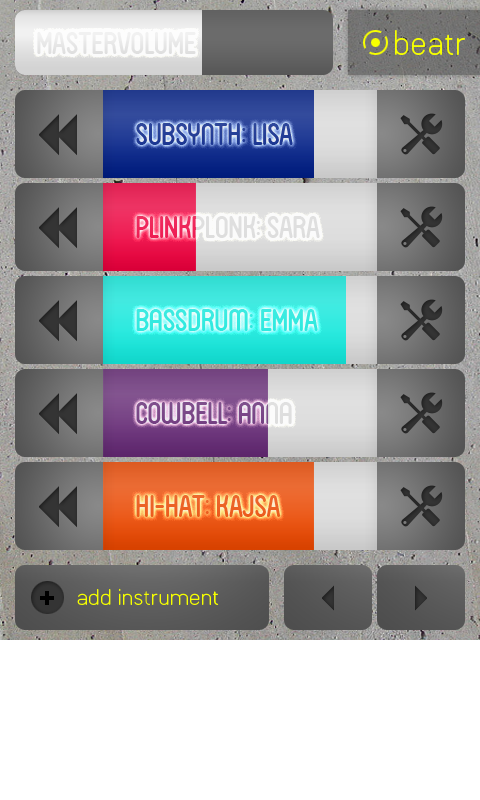
<style>
.page{position:relative;width:480px;height:800px;background:#ffffff}
.page>*{position:absolute;margin:0}
.t1{font:30px "LHLineSans-Thin";letter-spacing:-0.025em;color:#f6ff00}
.t2{font:30px "FVAlmelo";letter-spacing:-0.025em;color:#e9e9e9}
.t3{font:30px "FVAlmelo";letter-spacing:-0.025em;color:#253f97}
.t4{font:30px "FVAlmelo";letter-spacing:-0.025em}
.t5{font:30px "FVAlmelo";letter-spacing:-0.025em;color:#35eae0}
.t6{font:30px "FVAlmelo";letter-spacing:-0.025em;color:#7b4a89}
.t7{font:30px "FVAlmelo";letter-spacing:-0.025em;color:#ec6225}
.t8{font:20px "LHLineSans-Thin";letter-spacing:-0.025em;color:#f6ff00}
</style>
<div class="page">
<p class="t1" style="left:395px;top:30px;width:70px;height:25px">beatr</p>
<p class="t2" style="left:37px;top:32px;width:159px;height:22px">MASTERVOLUME</p>
<p class="t3" style="left:136px;top:123px;width:157px;height:22px">subsynth: LISA</p>
<p class="t4" style="left:136px;top:216px;width:184px;height:22px">PLINKPLONK: SARA</p>
<p class="t5" style="left:136px;top:309px;width:182px;height:22px">bassdrum: EMMA</p>
<p class="t6" style="left:136px;top:402px;width:156px;height:22px">Cowbell: anna</p>
<p class="t7" style="left:136px;top:495px;width:145px;height:22px">HI-HAT: KAJSA</p>
<p class="t8" style="left:77px;top:588px;width:142px;height:17px">add instrument</p>
</div>
